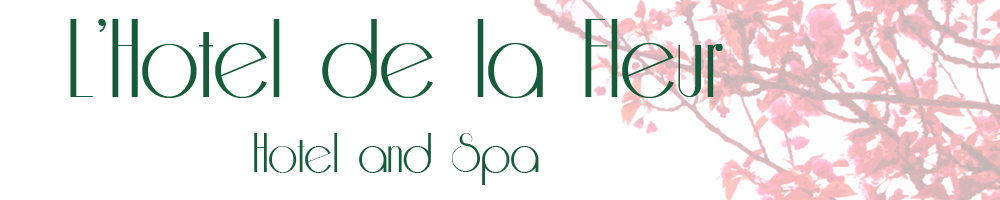
<style>
.page{position:relative;width:1000px;height:200px;background:#ffffff}
.page>*{position:absolute;margin:0}
.t1{font:127px "Riesling";color:#175c3a}
.t2{font:63.5px "Riesling";color:#175c3a}
</style>
<div class="page">
<p class="t1" style="left:70px;top:19px;width:653px;height:166px;text-align:center">L’Hotel de la Fleur<br><span class="t2">Hotel and Spa</span></p>
</div>
